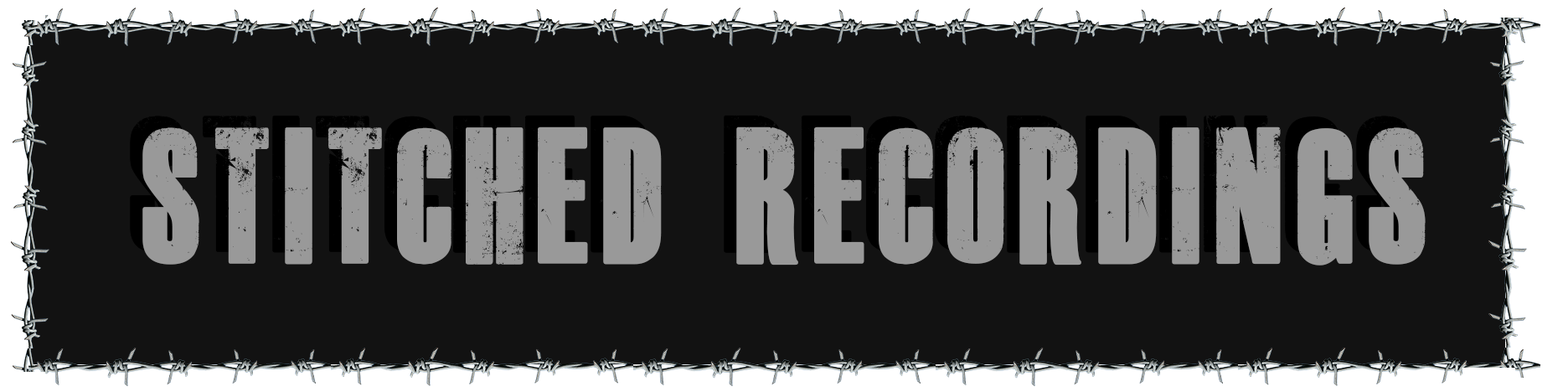
<style>
.page{position:relative;width:1568px;height:392px;background:#121212}
.page>*{position:absolute;margin:0}
.t1{font:134px "DeadKansas";letter-spacing:0.1em;color:#999999;scale:0.81 1}
</style>
<div class="page">
<p class="t1" style="left:142px;top:126px;width:1284px;height:140px">STITCHED RECORDINGS</p>
</div>
